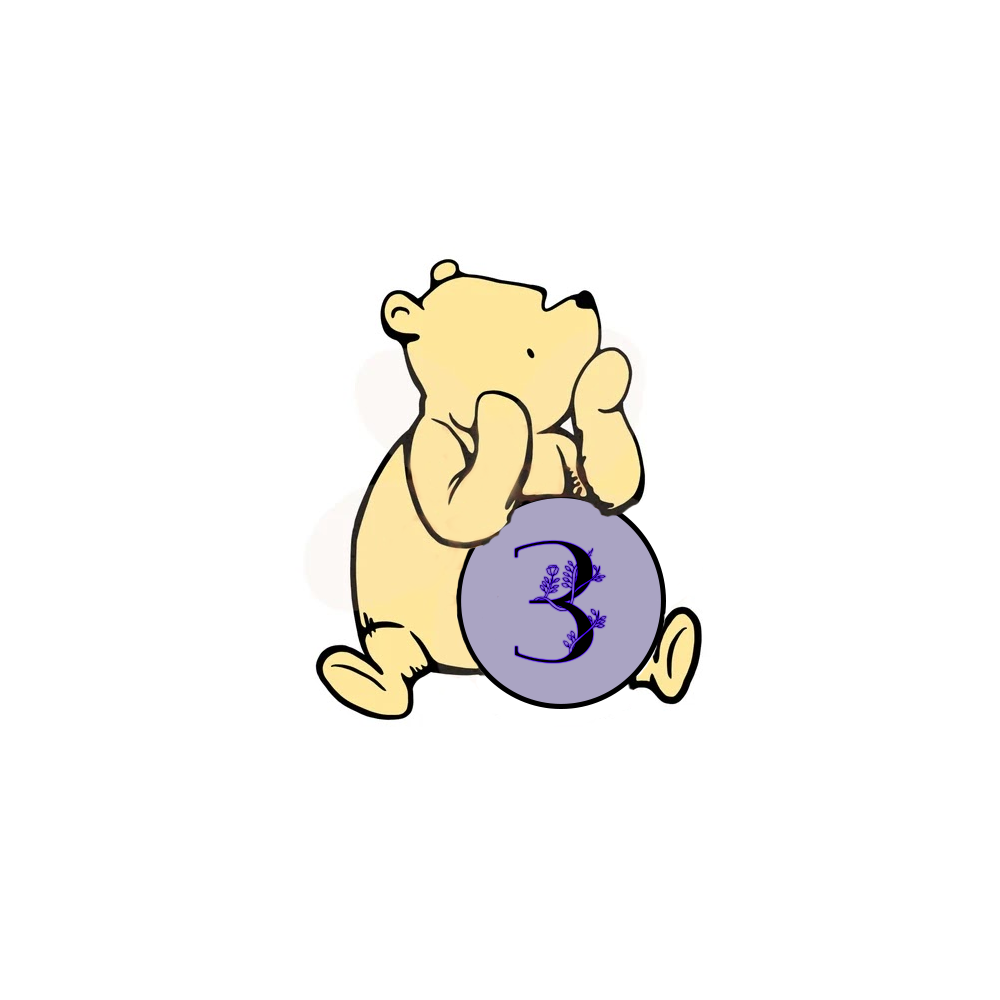
<style>
.page{position:relative;width:1000px;height:1000px;background:#ffffff}
.page>*{position:absolute;margin:0}
.t1{font:181.9px "Plante";color:#000000}
</style>
<div class="page">
<p class="t1" style="left:514px;top:540px;width:93px;height:123px">3</p>
</div>
